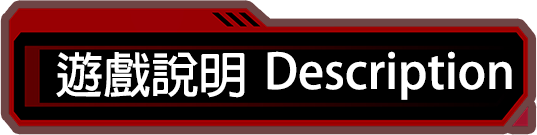
<style>
.page{position:relative;width:537px;height:135px;background:#000000}
.page>*{position:absolute;margin:0}
.t1{font:48px "AdobeFanHeitiStd-Bold";color:#ffffff}
</style>
<div class="page">
<p class="t1" style="left:56px;top:52px;width:189px;height:46px">遊戲說明</p>
<p class="t1" style="left:267px;top:51px;width:245px;height:49px">Description</p>
</div>
